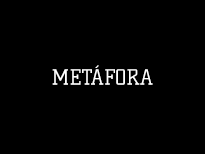
<style>
.page{position:relative;width:205px;height:154px;background:#000000}
.page>*{position:absolute;margin:0}
.t1{font:20.8px "KellySlab-Regular";color:#ffffff}
</style>
<div class="page">
<p class="t1" style="left:52px;top:65px;width:101px;height:20px">METÁFORA</p>
</div>
